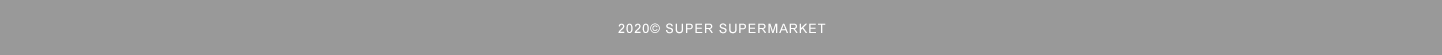
<style>
.page{position:relative;width:1442px;height:55px;background:#999999}
.page>*{position:absolute;margin:0}
.t1{font:12.8px "ArialMT";letter-spacing:0.075em;color:#ffffff;text-transform:uppercase}
</style>
<div class="page">
<p class="t1" style="left:618px;top:23px;width:208px;height:11px">2020© SUPER supermarket</p>
</div>
